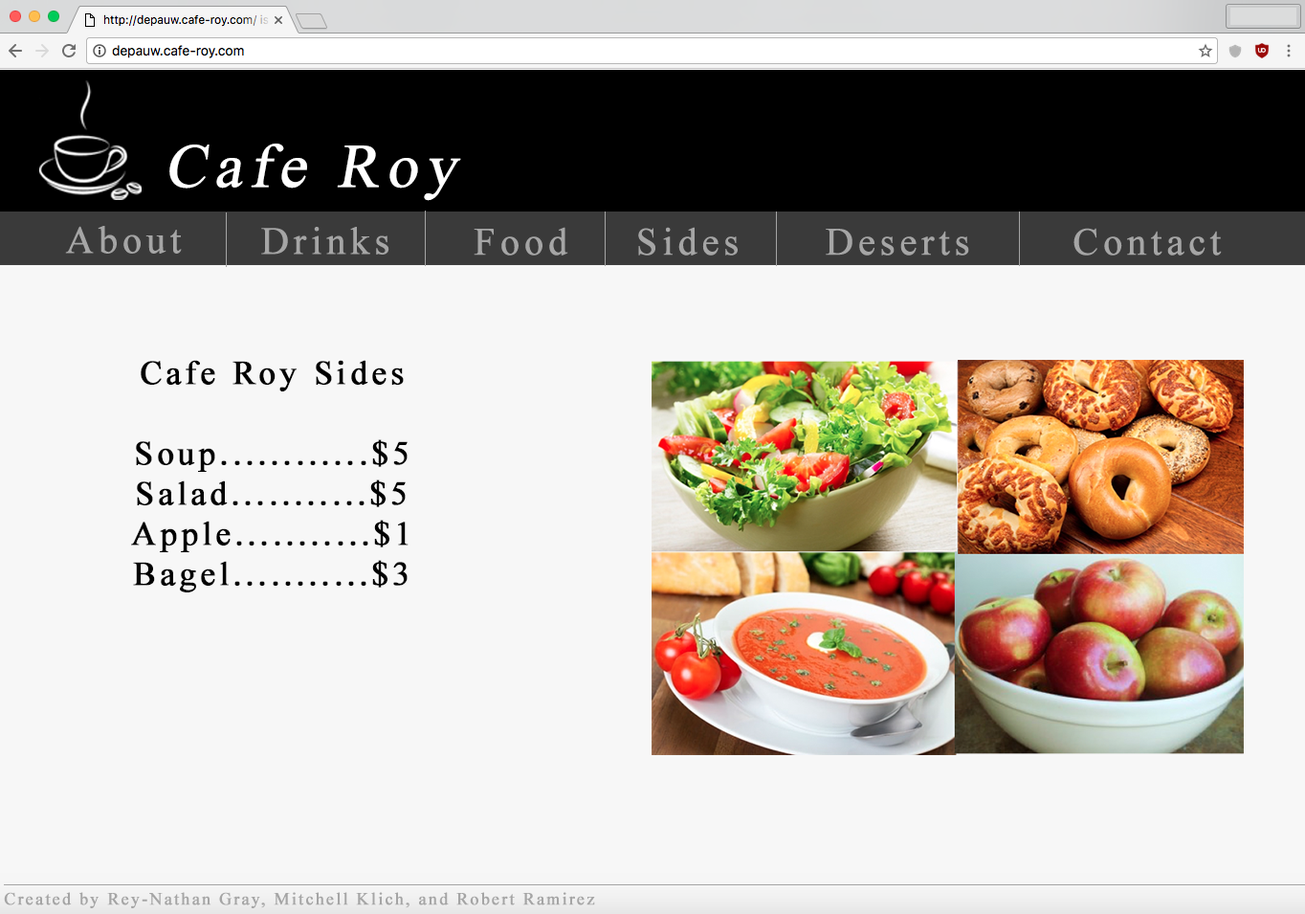
<style>
.page{position:relative;width:1305px;height:914px;background:#f7f7f7}
.page>*{position:absolute;margin:0}
.t1{font:61.7px "TimesNewRomanPSMT";letter-spacing:0.1em;color:#ffffff;font-weight:bold;font-style:italic}
.t2{font:33.5px "TimesNewRomanPSMT";letter-spacing:0.1em;color:#000000;font-weight:bold}
.t3{font:17.2px "TimesNewRomanPSMT";letter-spacing:0.1em;color:#a5a5a5;font-weight:bold}
</style>
<div class="page">
<p class="t1" style="left:169px;top:144px;width:292px;height:57px">Cafe Roy</p>
<p class="t2" style="left:131px;top:360px;width:278px;height:232px;text-align:center">Cafe Roy Sides<br><br>Soup............$5<br>Salad...........$5<br>Apple...........$1<br>Bagel...........$3</p>
<p class="t3" style="left:4px;top:892px;width:591px;height:16px">Created by Rey-Nathan Gray, Mitchell Klich, and Robert Ramirez</p>
</div>
